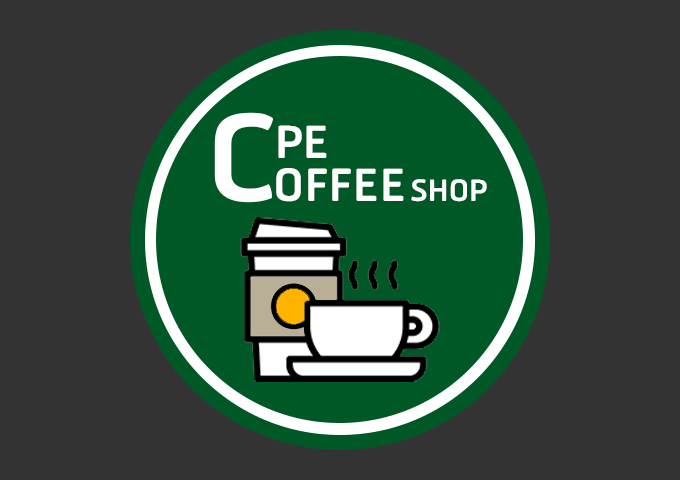
<style>
.page{position:relative;width:680px;height:480px;background:#333333}
.page>*{position:absolute;margin:0}
.t1{font:157.5px "RSU-Bold";color:#ffffff}
.t2{font:59.1px "RSU-Bold";color:#ffffff}
.t3{font:39.1px "RSU-Bold";color:#ffffff}
</style>
<div class="page">
<p class="t1" style="left:214px;top:112px;width:59px;height:91px">C</p>
<p class="t2" style="left:278px;top:125px;width:49px;height:33px">PE</p>
<p class="t2" style="left:276px;top:168px;width:128px;height:34px">OFFEE</p>
<p class="t3" style="left:411px;top:179px;width:76px;height:23px">SHOP</p>
</div>
